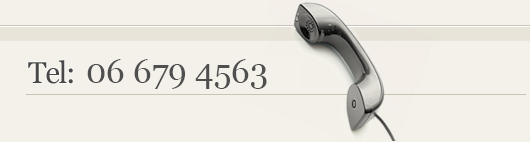
<style>
.page{position:relative;width:530px;height:142px;background:#f4f1ea}
.page>*{position:absolute;margin:0}
.t1{font:33.9px "Georgia";color:#4f4f4f}
</style>
<div class="page">
<p class="t1" style="left:87px;top:59px;width:180px;height:30px">06 679 4563</p>
</div>
